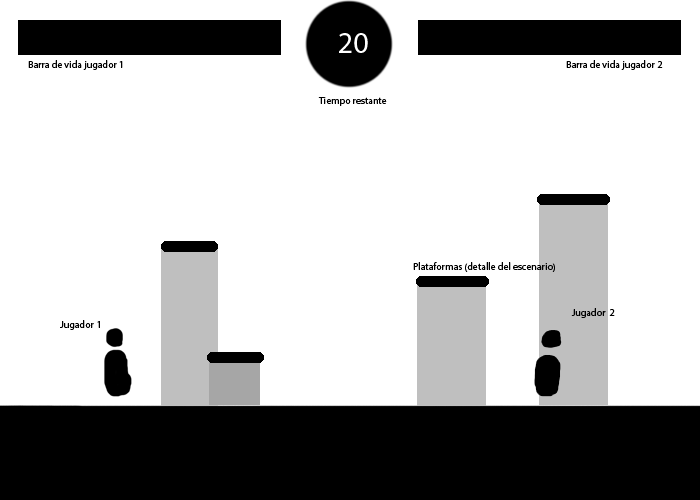
<style>
.page{position:relative;width:700px;height:500px;background:#ffffff}
.page>*{position:absolute;margin:0}
.t1{font:30px "MyriadPro-Regular";color:#ffffff}
.t2{font:10px "MyriadPro-Regular";color:#000000}
</style>
<div class="page">
<p class="t1" style="left:339px;top:33px;width:29px;height:20px">20</p>
<p class="t2" style="left:28px;top:60px;width:95px;height:10px">Barra de vida jugador 1</p>
<p class="t2" style="left:566px;top:60px;width:97px;height:10px">Barra de vida jugador 2</p>
<p class="t2" style="left:318px;top:97px;width:69px;height:9px">Tiempo restante</p>
<p class="t2" style="left:413px;top:262px;width:142px;height:10px">Plataformas (detalle del escenario)</p>
<p class="t2" style="left:571px;top:308px;width:44px;height:10px">Jugador  2</p>
<p class="t2" style="left:60px;top:320px;width:40px;height:10px">Jugador 1</p>
</div>
